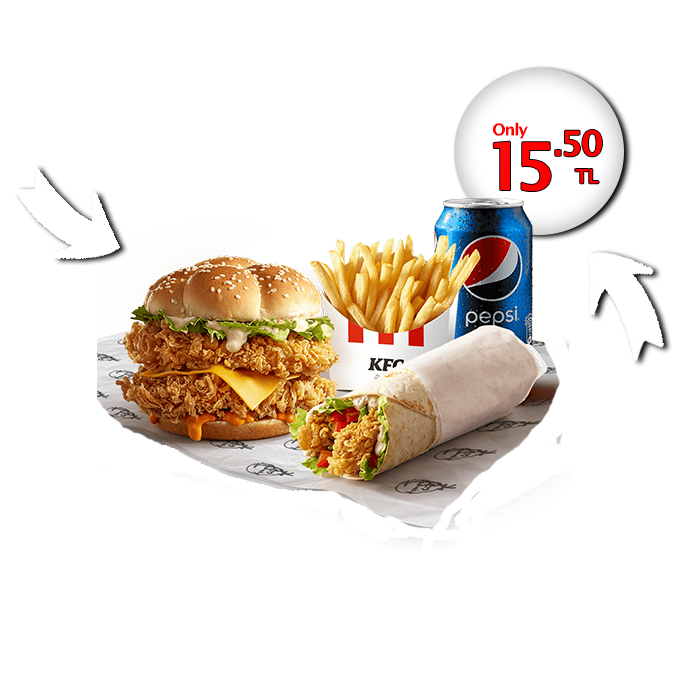
<style>
.page{position:relative;width:700px;height:700px;background:#ffffff}
.page>*{position:absolute;margin:0}
.t1{font:16.1px "LucidaSans-Demi";letter-spacing:-0.06em;color:#ff0000}
.t2{font:34.3px/27.5px "LucidaSans-Demi";letter-spacing:-0.04em;color:#ff0000}
.t3{font:19.2px/27.5px "LucidaSans-Demi";letter-spacing:-0.04em;color:#ff0000}
.t4{font:65.6px "LucidaSans-Demi";letter-spacing:-0.18em;color:#ff0000}
</style>
<div class="page">
<p class="t1" style="left:493px;top:122px;width:35px;height:17px">Only</p>
<p class="t2" style="left:555px;top:130px;width:47px;height:54px">.50<br><span class="t3">    TL</span></p>
<p class="t4" style="left:493px;top:141px;width:58px;height:50px">15</p>
</div>
